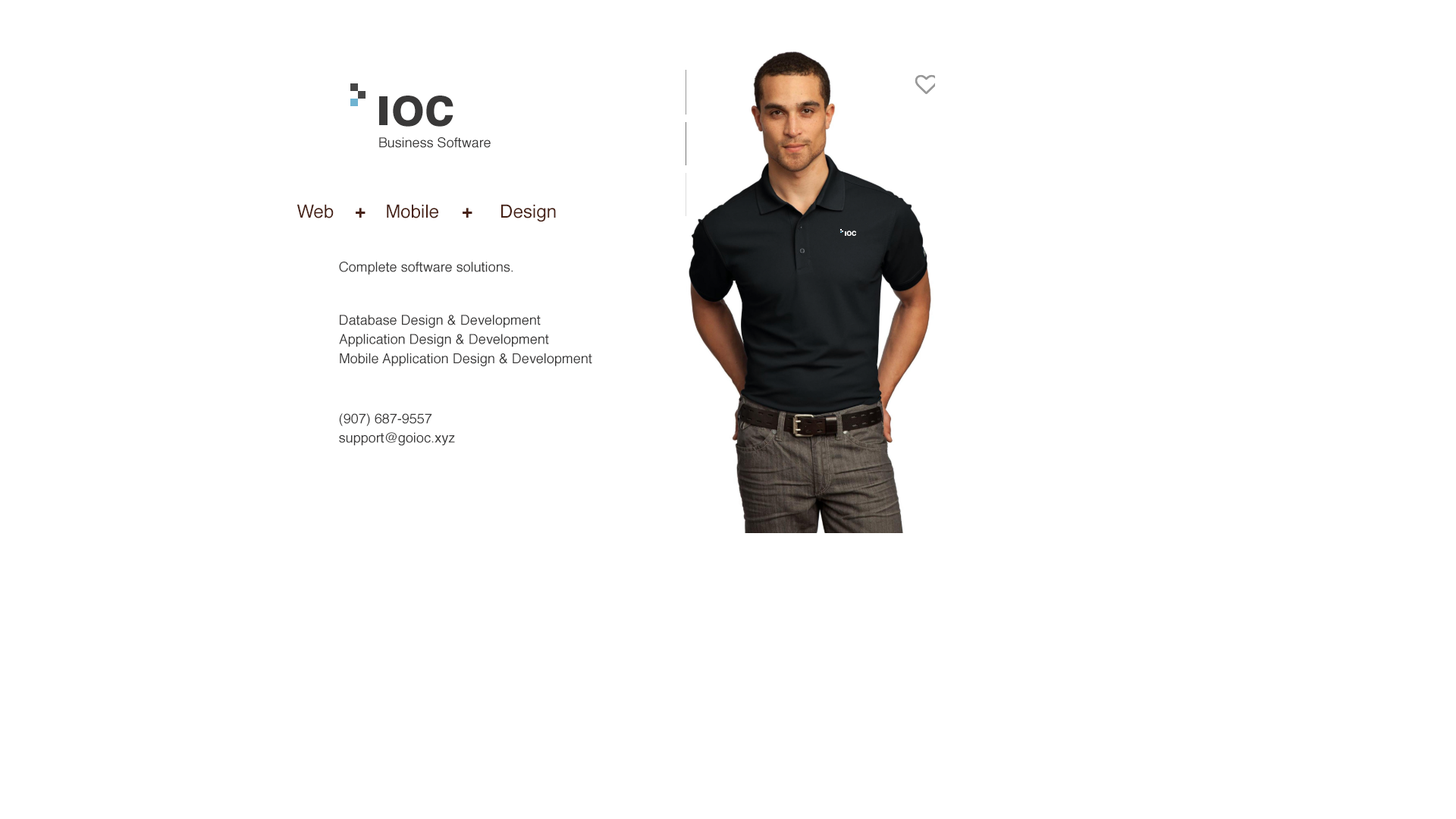
<style>
.page{position:relative;width:1456px;height:819px;background:#ffffff}
.page>*{position:absolute;margin:0}
.t1{font:54.6px "Helvetica-Bold";color:#393838}
.t2{font:13.6px "Helvetica";color:#393838}
.t3{font:18.2px "Helvetica";color:#472115}
.t4{font:18.2px "Helvetica-Bold";color:#472115}
.t5{font:8.7px "Helvetica-Bold";color:#ffffff}
.t6{font:13.6px/19.2px "Helvetica";color:#393838}
</style>
<div class="page">
<p class="t1" style="left:393px;top:96px;width:60px;height:31px">oc</p>
<p class="t2" style="left:379px;top:137px;width:112px;height:11px">Business Software</p>
<p class="t3" style="left:297px;top:204px;width:37px;height:14px">Web</p>
<p class="t4" style="left:356px;top:208px;width:10px;height:10px">+</p>
<p class="t3" style="left:387px;top:204px;width:51px;height:14px">Mobile</p>
<p class="t4" style="left:463px;top:208px;width:9px;height:10px">+</p>
<p class="t3" style="left:501px;top:204px;width:55px;height:18px">Design</p>
<p class="t5" style="left:846px;top:231px;width:10px;height:5px">oc</p>
<p class="t2" style="left:339px;top:262px;width:174px;height:13px">Complete software solutions.</p>
<p class="t6" style="left:339px;top:315px;width:253px;height:51px">Database Design &amp; Development<br>Application Design &amp; Development<br>Mobile Application Design &amp; Development</p>
<p class="t6" style="left:339px;top:413px;width:116px;height:33px">(907) 687-9557<br>support@goioc.xyz</p>
</div>
